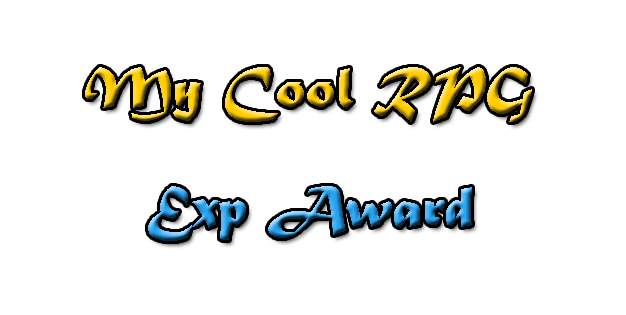
<style>
.page{position:relative;width:626px;height:315px;background:#ffffff}
.page>*{position:absolute;margin:0}
.t1{font:60px "MaturaMTScriptCapitals"}
</style>
<div class="page">
<p class="t1" style="left:85px;top:67px;width:447px;height:55px">My Cool RPG</p>
<p class="t1" style="left:148px;top:186px;width:324px;height:55px">Exp Award</p>
</div>
